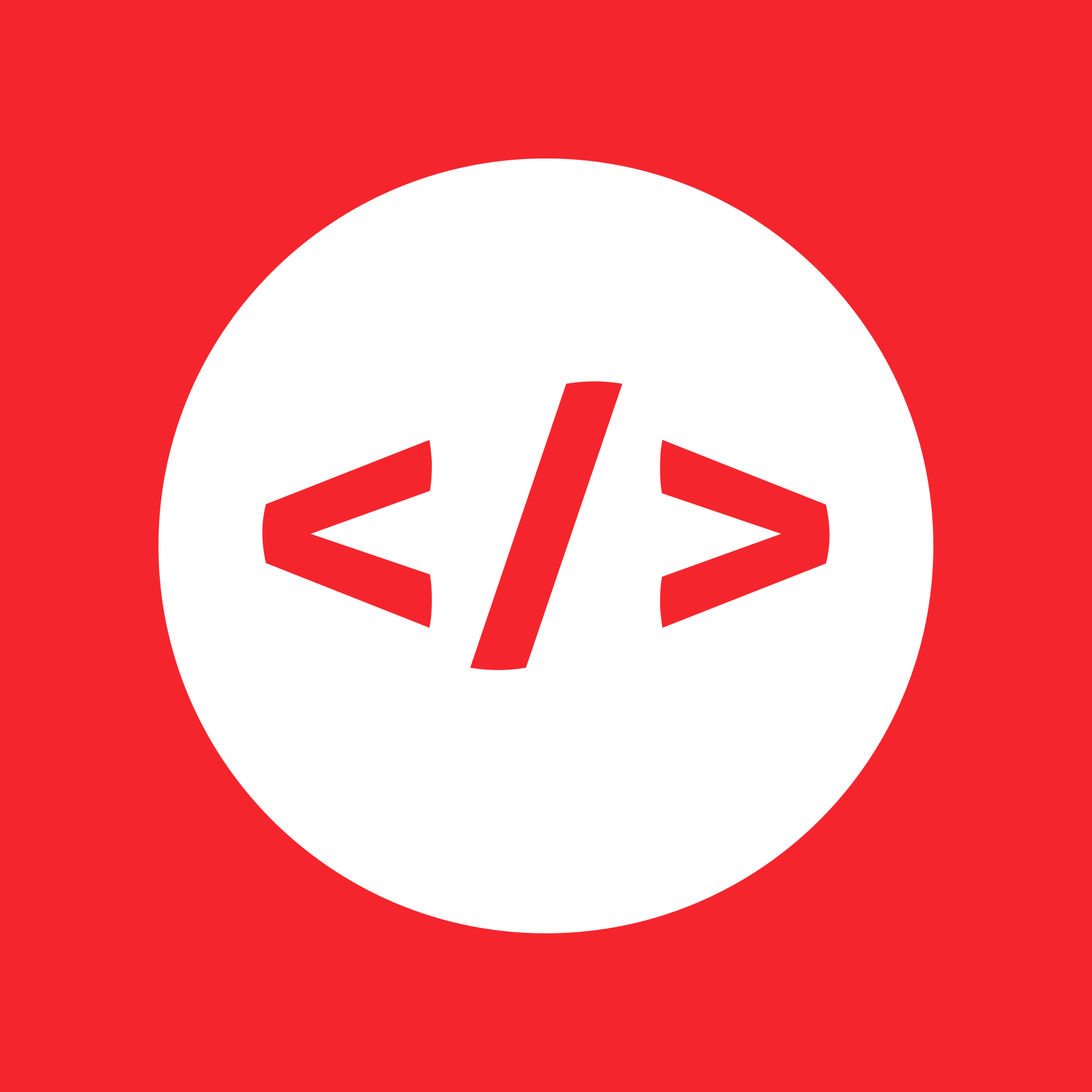
<style>
.page{position:relative;width:1092px;height:1092px;background:#f5252d}
.page>*{position:absolute;margin:0}
.t1{font:394.7px "Aller-Bold";color:#f5252c}
</style>
<div class="page">
<p class="t1" style="left:262px;top:381px;width:568px;height:289px">&lt;/&gt;</p>
</div>
